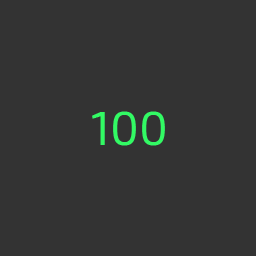
<style>
.page{position:relative;width:256px;height:256px;background:#333333}
.page>*{position:absolute;margin:0}
.t1{font:48px "Exo2-Regular";color:#32fa64}
</style>
<div class="page">
<p class="t1" style="left:92px;top:111px;width:73px;height:35px">100</p>
</div>
